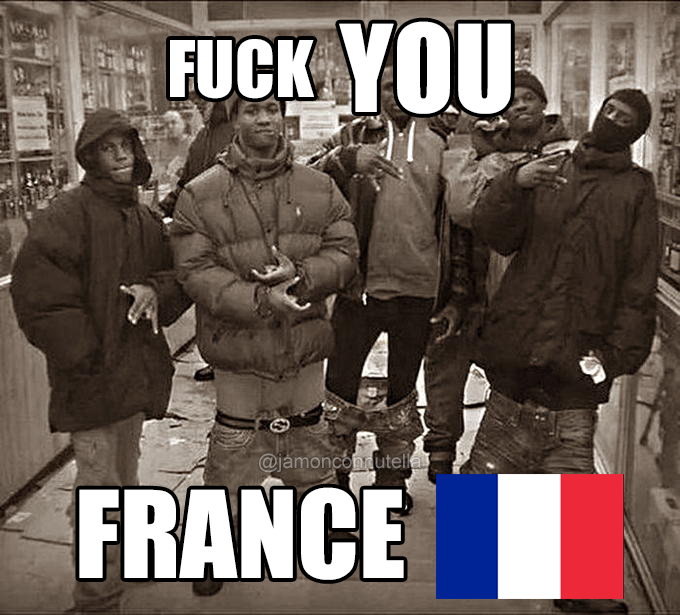
<style>
.page{position:relative;width:680px;height:615px}
.page>*{position:absolute;margin:0}
.t1{font:111.8px "Impact";color:#ffffff}
.t2{font:72px "Impact";color:#ffffff}
.t3{font:19.7px "ArialMT";color:#908983}
</style>
<div class="page">
<p class="t1" style="left:339px;top:21px;width:172px;height:93px">YOU</p>
<p class="t2" style="left:170px;top:39px;width:144px;height:60px">FUCK</p>
<p class="t3" style="left:259px;top:453px;width:162px;height:20px">@jamonconnutella</p>
<p class="t1" style="left:79px;top:487px;width:325px;height:93px">FRANCE</p>
</div>
